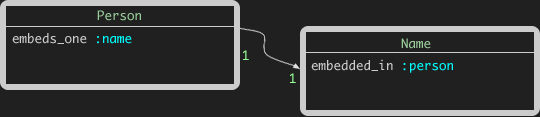
<style>
.page{position:relative;width:540px;height:117px;background:#202020}
.page>*{position:absolute;margin:0}
.t1{font:12.5px "Monaco";color:#99cc99}
.t2{font:12.5px "Monaco";color:#cccccc}
.t3{font:12.5px "Monaco";color:#00ffff}
.t4{font:12.5px "Monaco";color:#99ff99}
</style>
<div class="page">
<p class="t1" style="left:97px;top:10px;width:44px;height:11px">Person</p>
<p class="t2" style="left:12px;top:33px;width:120px;height:11px">embeds_one <span class="t3">:name</span></p>
<p class="t1" style="left:401px;top:38px;width:30px;height:11px">Name</p>
<p class="t4" style="left:243px;top:50px;width:6px;height:10px">1</p>
<p class="t2" style="left:311px;top:59px;width:142px;height:14px">embedded_in <span class="t3">:person</span></p>
<p class="t4" style="left:290px;top:73px;width:6px;height:10px">1</p>
</div>
